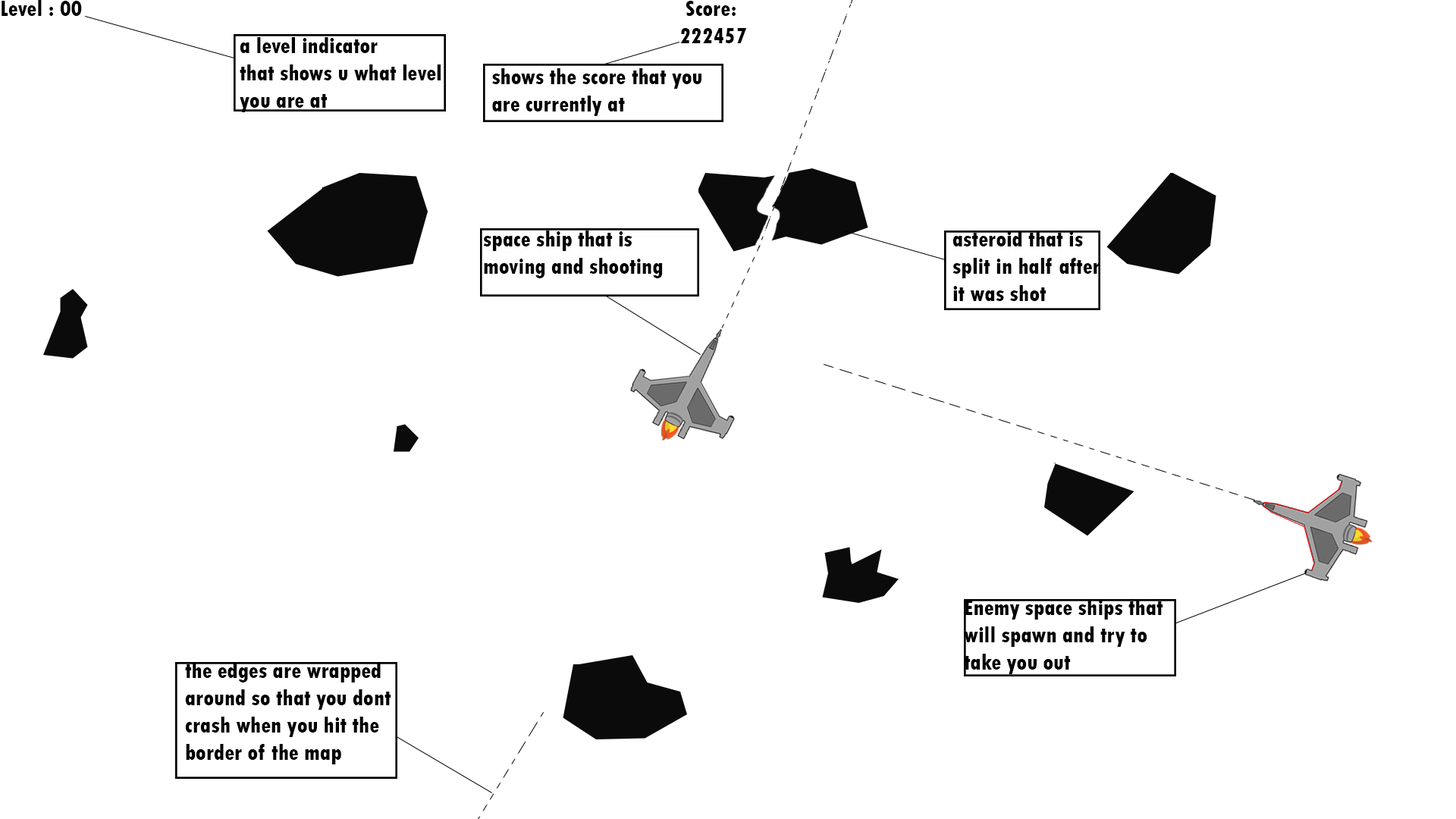
<style>
.page{position:relative;width:1456px;height:819px;background:#ffffff}
.page>*{position:absolute;margin:0}
.t1{font:22.7px "TwCenMT-CondensedExtraBold";color:#000000}
</style>
<div class="page">
<p class="t1" style="left:2px;top:0px;width:80px;height:16px">Level : 00</p>
<p class="t1" style="left:680px;top:1px;width:67px;height:42px">Score:<br> 222457</p>
<p class="t1" style="left:240px;top:37px;width:201px;height:75px">a level indicator<br>that shows u what level you are at</p>
<p class="t1" style="left:492px;top:68px;width:209px;height:48px">shows the score that you are currently at</p>
<p class="t1" style="left:483px;top:231px;width:180px;height:47px">space ship that is moving and shooting</p>
<p class="t1" style="left:952px;top:231px;width:148px;height:70px">asteroid that is split in half after it was shot</p>
<p class="t1" style="left:964px;top:599px;width:199px;height:75px">Enemy space ships that will spawn and try to take you out</p>
<p class="t1" style="left:185px;top:662px;width:206px;height:102px">the edges are wrapped around so that you dont crash when you hit the border of the map</p>
</div>
